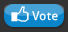
<style>
.page{position:relative;width:68px;height:32px;background:#333333}
.page>*{position:absolute;margin:0}
.t1{font:12px "Aller";letter-spacing:0.04em;color:#ffffff}
</style>
<div class="page">
<p class="t1" style="left:32px;top:11px;width:26px;height:10px">Vote</p>
</div>
